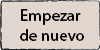
<style>
.page{position:relative;width:100px;height:50px;background:#e1d7ce}
.page>*{position:absolute;margin:0}
.t1{font:16.7px "MyriadHebrew-Regular";color:#000000}
</style>
<div class="page">
<p class="t1" style="left:20px;top:9px;width:64px;height:32px;text-align:center">Empezar <br>de nuevo</p>
</div>
